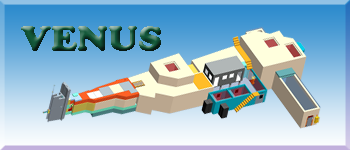
<style>
.page{position:relative;width:350px;height:150px}
.page>*{position:absolute;margin:0}
.t1{font:37px "CooperBlack"}
</style>
<div class="page">
<p class="t1" style="left:21px;top:26px;width:140px;height:25px">VENUS</p>
</div>
